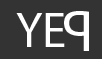
<style>
.page{position:relative;width:102px;height:59px;background:#333333}
.page>*{position:absolute;margin:0}
.t1{font:84px "MyriadPro-Regular";color:#ffffff}
.t2{font:58px "MyriadPro-Regular";color:#ffffff}
</style>
<div class="page">
<p class="t1" style="left:16px;top:13px;width:49px;height:34px">YE</p>
<p class="t2" style="left:64px;top:11px;width:25px;height:40px;rotate:180deg">P</p>
</div>
